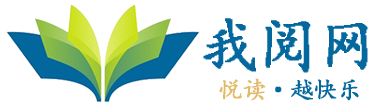
<style>
.page{position:relative;width:375px;height:110px;background:#ffffff}
.page>*{position:absolute;margin:0}
.t1{font:59.8px "¿¬Ìå";letter-spacing:-0.012em;color:#04679e;font-weight:bold}
.t2{font:24px "¿¬Ìå";letter-spacing:-0.012em;color:#04679e;font-weight:bold}
.t3{font:24px "¿¬Ìå";letter-spacing:-0.012em;color:#e1bb6a;font-weight:bold}
</style>
<div class="page">
<p class="t1" style="left:203px;top:18px;width:165px;height:55px">我阅网</p>
<p class="t2" style="left:219px;top:78px;width:140px;height:23px"><span class="t3">悦读</span>·越快乐</p>
</div>
